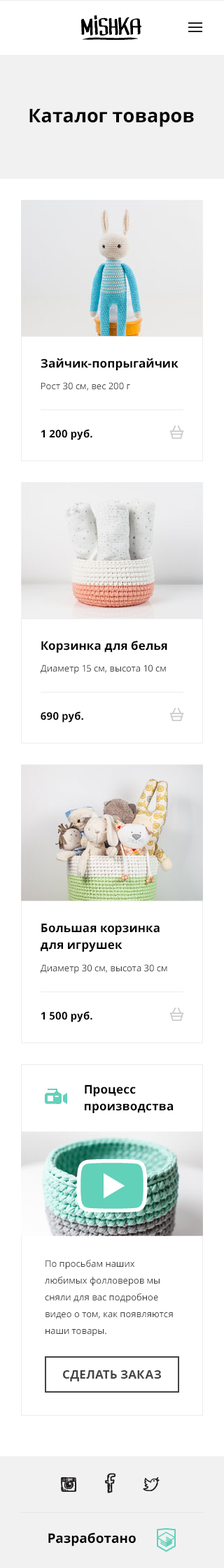
<style>
.page{position:relative;width:224px;height:1568px;background:#ffffff}
.page>*{position:absolute;margin:0}
.t1{font:18.9px "OpenSans-Bold";color:#000000}
.t2{font:11.9px "OpenSans-Bold";color:#000000}
.t3{font:9.1px "OpenSans";color:#444444}
.t4{font:10.5px "OpenSans-Bold";color:#000000}
.t5{font:11.9px/16.8px "OpenSans-Bold";color:#000000}
.t6{font:9.1px/16.8px "OpenSans";color:#444444}
.t7{font:11.9px "OpenSans-Bold";color:#444444;text-transform:uppercase}
.t8{font:13.3px "OpenSans-Bold";color:#000000}
</style>
<div class="page">
<p class="t1" style="left:29px;top:108px;width:165px;height:19px">Каталог товаров</p>
<p class="t2" style="left:41px;top:358px;width:137px;height:12px">Зайчик-попрыгайчик</p>
<p class="t3" style="left:41px;top:382px;width:89px;height:9px">Рост 30 см, вес 200 г</p>
<p class="t4" style="left:41px;top:429px;width:51px;height:11px">1 200 руб.</p>
<p class="t2" style="left:41px;top:641px;width:126px;height:12px">Корзинка для белья</p>
<p class="t3" style="left:40px;top:665px;width:126px;height:9px">Диаметр 15 см, высота 10 см</p>
<p class="t4" style="left:41px;top:711px;width:42px;height:12px">690 руб.</p>
<p class="t5" style="left:41px;top:923px;width:118px;height:29px">Большая корзинка<br>для игрушек</p>
<p class="t3" style="left:40px;top:964px;width:127px;height:9px">Диаметр 30 см, высота 30 см</p>
<p class="t4" style="left:41px;top:1011px;width:51px;height:11px">1 500 руб.</p>
<p class="t5" style="left:85px;top:1084px;width:88px;height:29px">Процесс<br>производства</p>
<p class="t6" style="left:45px;top:1260px;width:128px;height:76px">По просьбам наших любимых фолловеров мы сняли для вас подробное видео о том, как появляются наши товары.</p>
<p class="t7" style="left:63px;top:1370px;width:98px;height:11px">СДелать заказ</p>
<p class="t8" style="left:48px;top:1532px;width:88px;height:14px">Разработано</p>
</div>
